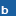
<style>
.page{position:relative;width:16px;height:16px;background:#195fa0}
.page>*{position:absolute;margin:0}
.t1{font:11px "CenturyGothic-Bold";color:#ffffff}
</style>
<div class="page">
<p class="t1" style="left:1px;top:6px;width:8px;height:8px">b</p>
</div>
